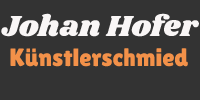
<style>
.page{position:relative;width:200px;height:100px;background:#333333}
.page>*{position:absolute;margin:0}
.t1{font:30px "Shrikhand-Regular";color:#f9f6f6}
</style>
<div class="page">
<p class="t1" style="left:1px;top:13px;width:198px;height:24px">Johan Hofer</p>
</div>
